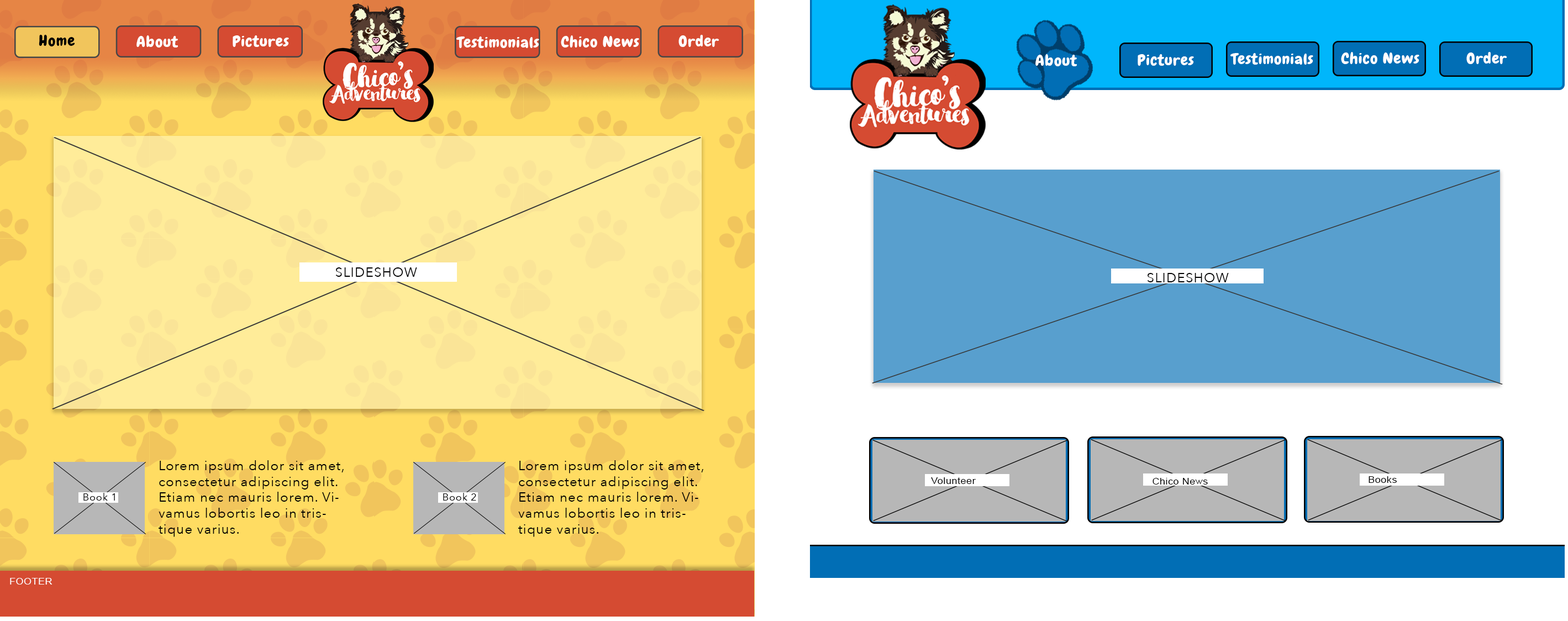
<style>
.page{position:relative;width:1568px;height:621px;background:#ffffff}
.page>*{position:absolute;margin:0}
.t1{font:14.9px "Chewy-Regular";letter-spacing:0.03em;color:#000000;scale:1.11 1}
.t2{font:14.9px "Chewy-Regular";letter-spacing:0.03em;color:#fffefe;scale:1.11 1}
.t3{font:13.3px "AvenirNext-Regular";letter-spacing:0.05em;color:#000000}
.t4{font:9px "ArialMT";letter-spacing:0.03em;color:#000000;scale:1.11 1}
.t5{font:9.9px "AvenirNext-Regular";letter-spacing:0.05em;color:#000000}
.t6{font:9px "ArialMT";letter-spacing:0.03em;color:#fffefe;scale:1.11 1}
</style>
<div class="page">
<p class="t1" style="left:39px;top:35px;width:36px;height:11px">Home</p>
<p class="t2" style="left:136px;top:35px;width:42px;height:13px">About</p>
<p class="t2" style="left:233px;top:35px;width:56px;height:12px">Pictures</p>
<p class="t2" style="left:456px;top:36px;width:83px;height:12px">Testimonials</p>
<p class="t2" style="left:561px;top:35px;width:78px;height:13px">Chico News</p>
<p class="t2" style="left:678px;top:35px;width:41px;height:12px">Order</p>
<p class="t2" style="left:1230px;top:53px;width:83px;height:12px">Testimonials</p>
<p class="t2" style="left:1341px;top:52px;width:78px;height:12px">Chico News</p>
<p class="t2" style="left:1466px;top:52px;width:41px;height:12px">Order</p>
<p class="t2" style="left:1035px;top:54px;width:42px;height:12px">About</p>
<p class="t2" style="left:1138px;top:54px;width:56px;height:12px">Pictures</p>
<p class="t3" style="left:335px;top:267px;width:82px;height:10px">SLIDESHOW</p>
<p class="t3" style="left:1147px;top:273px;width:82px;height:9px">SLIDESHOW</p>
<p class="t3" style="left:159px;top:460px;width:185px;height:77px">Lorem ipsum dolor sit amet, consectetur adipiscing elit. Etiam nec mauris lorem. Vivamus lobortis leo in tristique varius.</p>
<p class="t3" style="left:518px;top:460px;width:185px;height:77px">Lorem ipsum dolor sit amet, consectetur adipiscing elit. Etiam nec mauris lorem. Vivamus lobortis leo in tristique varius.</p>
<p class="t4" style="left:931px;top:477px;width:45px;height:7px">Volunteer</p>
<p class="t4" style="left:1153px;top:478px;width:55px;height:7px">Chico News</p>
<p class="t4" style="left:1369px;top:476px;width:28px;height:7px">Books</p>
<p class="t5" style="left:83px;top:493px;width:32px;height:8px">Book 1</p>
<p class="t5" style="left:443px;top:493px;width:33px;height:8px">Book 2</p>
<p class="t6" style="left:10px;top:578px;width:42px;height:7px">FOOTER</p>
</div>
